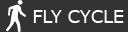
<style>
.page{position:relative;width:128px;height:32px;background:#333333}
.page>*{position:absolute;margin:0}
.t1{font:17.5px "Verdana";color:#ffffff}
</style>
<div class="page">
<p class="t1" style="left:33px;top:10px;width:91px;height:13px">FLY CYCLE</p>
</div>
